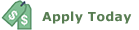
<style>
.page{position:relative;width:139px;height:30px;background:#ffffff}
.page>*{position:absolute;margin:0}
.t1{font:12.5px "Verdana-Bold";letter-spacing:0.025em;color:#587d52}
</style>
<div class="page">
<p class="t1" style="left:42px;top:11px;width:90px;height:13px">Apply Today</p>
</div>
